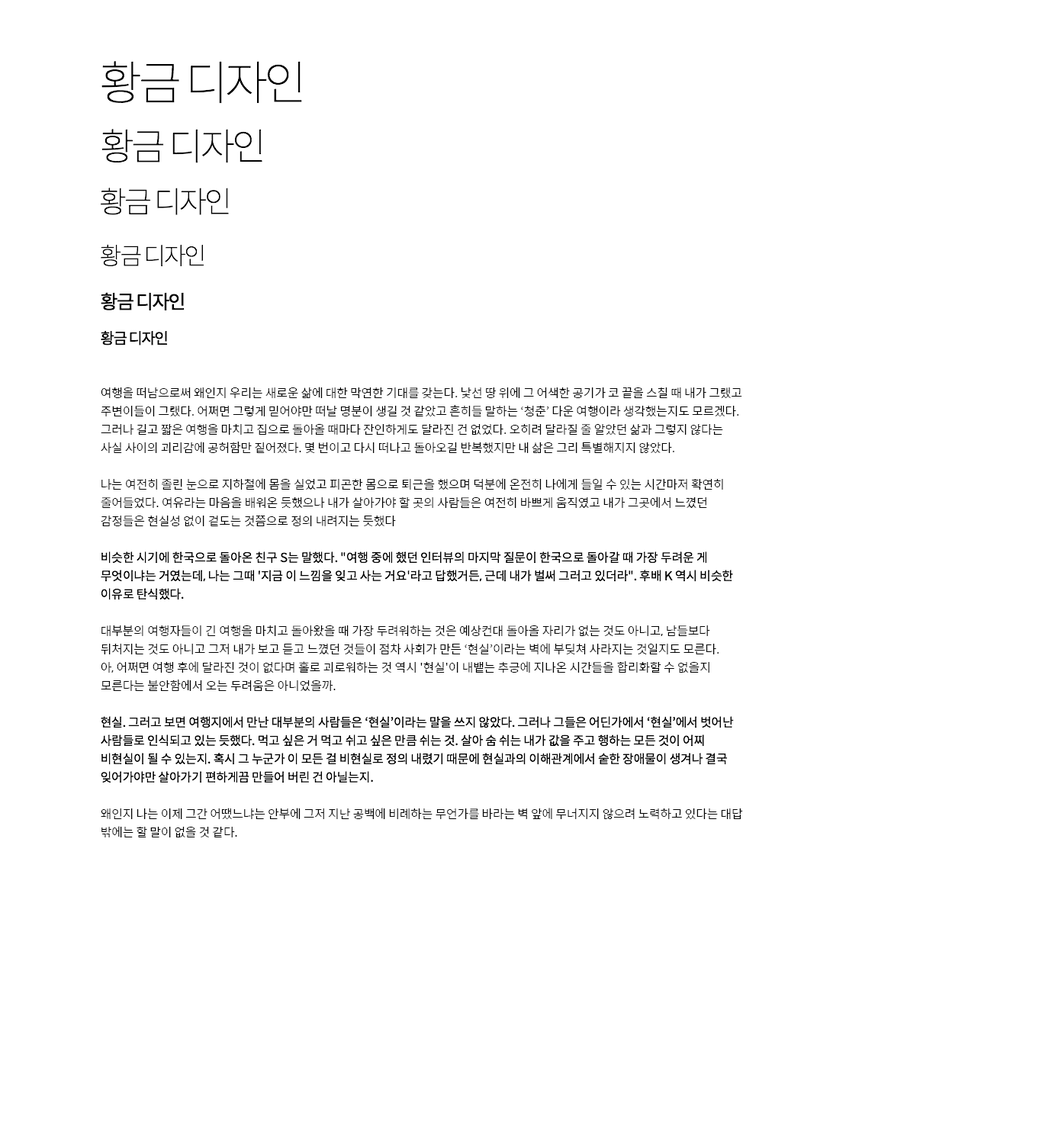
<style>
.page{position:relative;width:1042px;height:1144px;background:#ffffff}
.page>*{position:absolute;margin:0}
.t1{font:46.6px "SpoqaHanSans-Thin";letter-spacing:-0.07em;color:#000000}
.t2{font:37.3px "SpoqaHanSans-Thin";letter-spacing:-0.07em;color:#000000}
.t3{font:29.8px "SpoqaHanSans-Thin";letter-spacing:-0.07em;color:#000000}
.t4{font:23.8px "SpoqaHanSans-Thin";letter-spacing:-0.07em;color:#000000}
.t5{font:19.1px "SpoqaHanSans-Regular";letter-spacing:-0.07em;color:#000000}
.t6{font:15.3px "SpoqaHanSans-Regular";letter-spacing:-0.07em;color:#000000}
.t7{font:12.2px "SpoqaHanSans-Regular";letter-spacing:-0.015em;color:#010101}
</style>
<div class="page">
<p class="t1" style="left:101px;top:61px;width:201px;height:43px">황금 디자인</p>
<p class="t2" style="left:101px;top:129px;width:161px;height:34px">황금 디자인</p>
<p class="t3" style="left:101px;top:188px;width:128px;height:27px">황금 디자인</p>
<p class="t4" style="left:101px;top:244px;width:103px;height:23px">황금 디자인</p>
<p class="t5" style="left:101px;top:292px;width:84px;height:18px">황금 디자인</p>
<p class="t6" style="left:101px;top:330px;width:67px;height:16px">황금 디자인</p>
<p class="t7" style="left:101px;top:387px;width:642px;height:451px">여행을 떠남으로써 왜인지 우리는 새로운 삶에 대한 막연한 기대를 갖는다. 낯선 땅 위에 그 어색한 공기가 코 끝을 스칠 때 내가 그랬고 주변이들이 그랬다. 어쩌면 그렇게 믿어야만 떠날 명분이 생길 것 같았고 흔히들 말하는 ‘청춘’ 다운 여행이라 생각했는지도 모르겠다. 그러나 길고 짧은 여행을 마치고 집으로 돌아올 때마다 잔인하게도 달라진 건 없었다. 오히려 달라질 줄 알았던 삶과 그렇지 않다는 사실 사이의 괴리감에 공허함만 짙어졌다. 몇 번이고 다시 떠나고 돌아오길 반복했지만 내 삶은 그리 특별해지지 않았다.<br>나는 여전히 졸린 눈으로 지하철에 몸을 실었고 피곤한 몸으로 퇴근을 했으며 덕분에 온전히 나에게 들일 수 있는 시간마저 확연히 줄어들었다. 여유라는 마음을 배워온 듯했으나 내가 살아가야 할 곳의 사람들은 여전히 바쁘게 움직였고 내가 그곳에서 느꼈던 감정들은 현실성 없이 겉도는 것쯤으로 정의 내려지는 듯했다<br>비슷한 시기에 한국으로 돌아온 친구 S는 말했다. "여행 중에 했던 인터뷰의 마지막 질문이 한국으로 돌아갈 때 가장 두려운 게 무엇이냐는 거였는데, 나는 그때 '지금 이 느낌을 잊고 사는 거요'라고 답했거든, 근데 내가 벌써 그러고 있더라". 후배 K 역시 비슷한 이유로 탄식했다.<br>대부분의 여행자들이 긴 여행을 마치고 돌아왔을 때 가장 두려워하는 것은 예상컨대 돌아올 자리가 없는 것도 아니고, 남들보다 뒤처지는 것도 아니고 그저 내가 보고 듣고 느꼈던 것들이 점차 사회가 만든 ‘현실’이라는 벽에 부딪쳐 사라지는 것일지도 모른다. 아, 어쩌면 여행 후에 달라진 것이 없다며 홀로 괴로워하는 것 역시 '현실'이 내뱉는 추긍에 지나온 시간들을 합리화할 수 없을지 모른다는 불안함에서 오는 두려움은 아니었을까.<br>현실. 그러고 보면 여행지에서 만난 대부분의 사람들은 ‘현실’이라는 말을 쓰지 않았다. 그러나 그들은 어딘가에서 ‘현실’에서 벗어난 사람들로 인식되고 있는 듯했다. 먹고 싶은 거 먹고 쉬고 싶은 만큼 쉬는 것. 살아 숨 쉬는 내가 값을 주고 행하는 모든 것이 어찌 비현실이 될 수 있는지. 혹시 그 누군가 이 모든 걸 비현실로 정의 내렸기 때문에 현실과의 이해관계에서 숱한 장애물이 생겨나 결국 잊어가야만 살아가기 편하게끔 만들어 버린 건 아닐는지.<br>왜인지 나는 이제 그간 어땠느냐는 안부에 그저 지난 공백에 비례하는 무언가를 바라는 벽 앞에 무너지지 않으려 노력하고 있다는 대답 밖에는 할 말이 없을 것 같다.</p>
</div>
